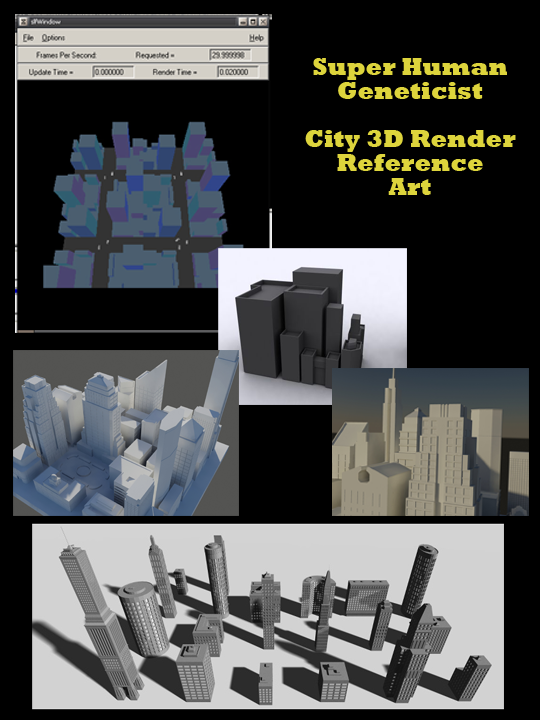
<style>
.page{position:relative;width:540px;height:720px;background:#000000}
.page>*{position:absolute;margin:0}
.t1{font:24px/24px "Rockwell-ExtraBold";color:#ddd43c}
</style>
<div class="page">
<p class="t1" style="left:305px;top:58px;width:211px;height:137px;text-align:center">Super Human Geneticist<br><br>City 3D Render Reference<br>Art</p>
</div>
